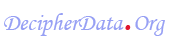
<style>
.page{position:relative;width:169px;height:49px;background:#ffffff}
.page>*{position:absolute;margin:0}
.t1{font:24px "MonotypeCorsiva";color:#97a0f4}
.t2{font:48px "MonotypeCorsiva";color:#e0162e}
</style>
<div class="page">
<p class="t1" style="left:4px;top:13px;width:161px;height:23px">DecipherData<span class="t2">.</span>Org</p>
</div>
